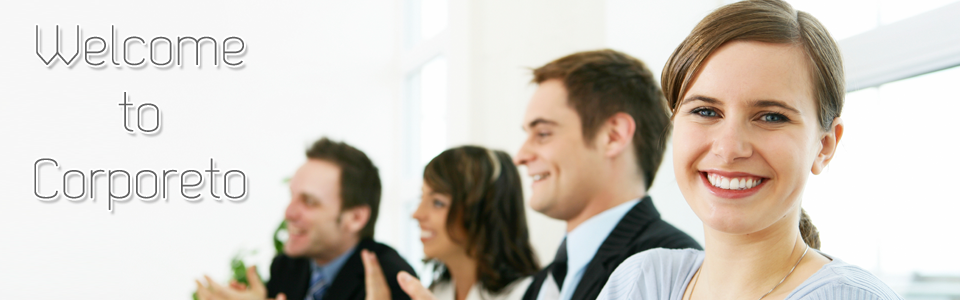
<style>
.page{position:relative;width:960px;height:300px}
.page>*{position:absolute;margin:0}
.t1{font:55.5px "Dekar-Light";color:#616161;font-weight:bold}
</style>
<div class="page">
<p class="t1" style="left:34px;top:25px;width:212px;height:185px;text-align:center">Welcome<br>to<br>Corporeto</p>
</div>
